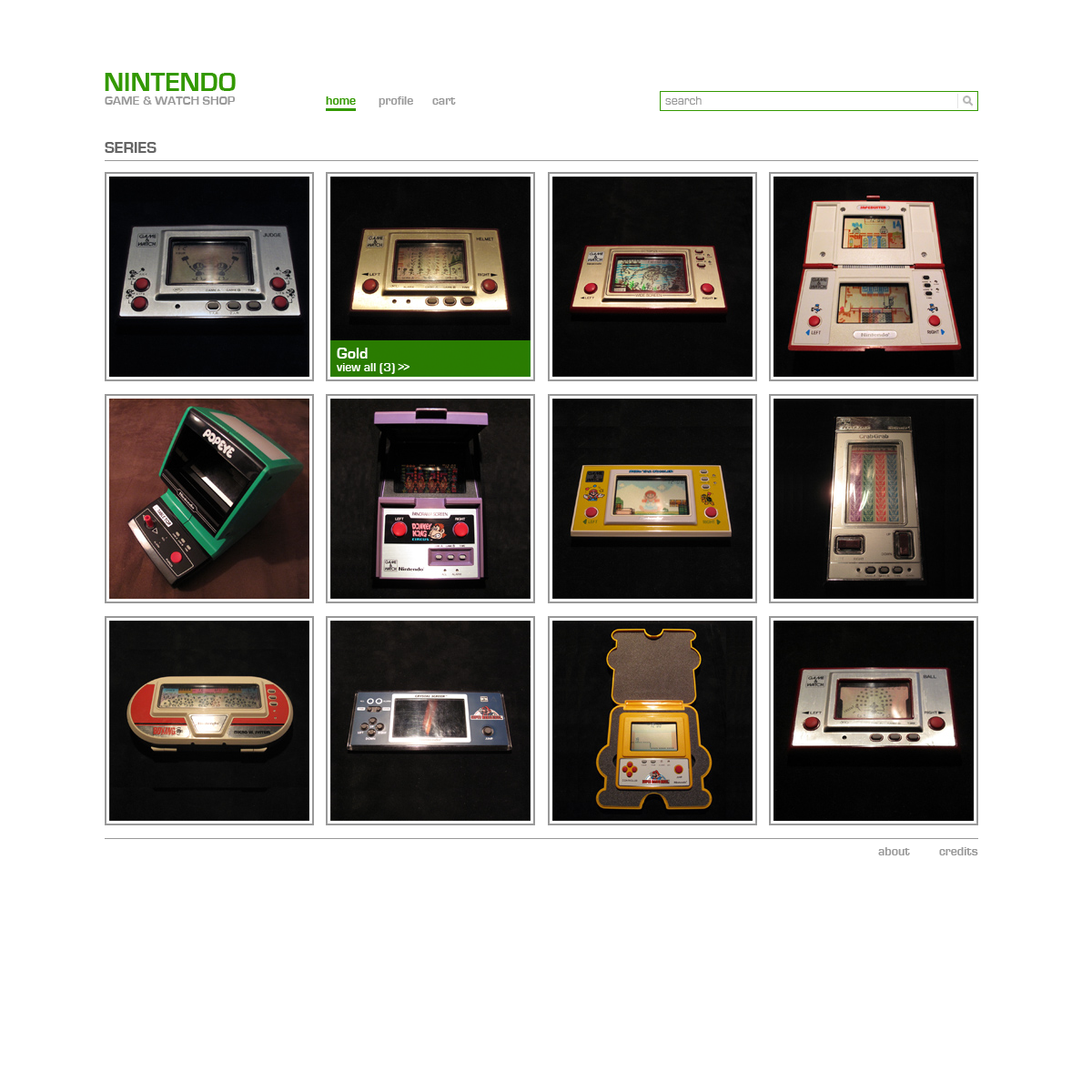
<style>
.page{position:relative;width:1092px;height:1092px;background:#ffffff}
.page>*{position:absolute;margin:0}
.t1{font:27.3px "EurostileBold";color:#339900;text-transform:uppercase}
.t2{font:12.7px "EurostileBold";letter-spacing:0.005em;color:#999999;text-transform:uppercase}
.t3{font:12.7px "EurostileBold";color:#339900}
.t4{font:12.7px "EurostileBold";color:#999999}
.t5{font:12.7px "EurostileRegular";color:#999999}
.t6{font:16.4px "EurostileBold";color:#666666;text-transform:uppercase}
.t7{font:12.7px/12.7px "EurostileBold";color:#fefffe}
.t8{font:16.4px/12.7px "EurostileBold";color:#fefffe}
</style>
<div class="page">
<p class="t1" style="left:105px;top:73px;width:131px;height:18px">Nintendo</p>
<p class="t2" style="left:105px;top:96px;width:131px;height:9px">Game &amp; Watch Shop</p>
<p class="t3" style="left:326px;top:96px;width:30px;height:9px">home</p>
<p class="t4" style="left:379px;top:96px;width:34px;height:11px">profile</p>
<p class="t4" style="left:432px;top:97px;width:24px;height:8px">cart</p>
<p class="t5" style="left:665px;top:96px;width:37px;height:9px">search</p>
<p class="t6" style="left:105px;top:142px;width:52px;height:11px">Series</p>
<p class="t7" style="left:336px;top:348px;width:73px;height:26px"><span class="t8">Gold<br></span>view all (3) &gt;&gt;</p>
<p class="t4" style="left:878px;top:847px;width:32px;height:8px">about</p>
<p class="t4" style="left:939px;top:847px;width:39px;height:8px">credits</p>
</div>
